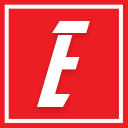
<style>
.page{position:relative;width:128px;height:128px;background:#ed1d24}
.page>*{position:absolute;margin:0}
.t1{font:83.5px "AvengeanceHeroicAvengerBold";color:#ffffff}
</style>
<div class="page">
<p class="t1" style="left:37px;top:21px;width:53px;height:86px">E</p>
</div>
